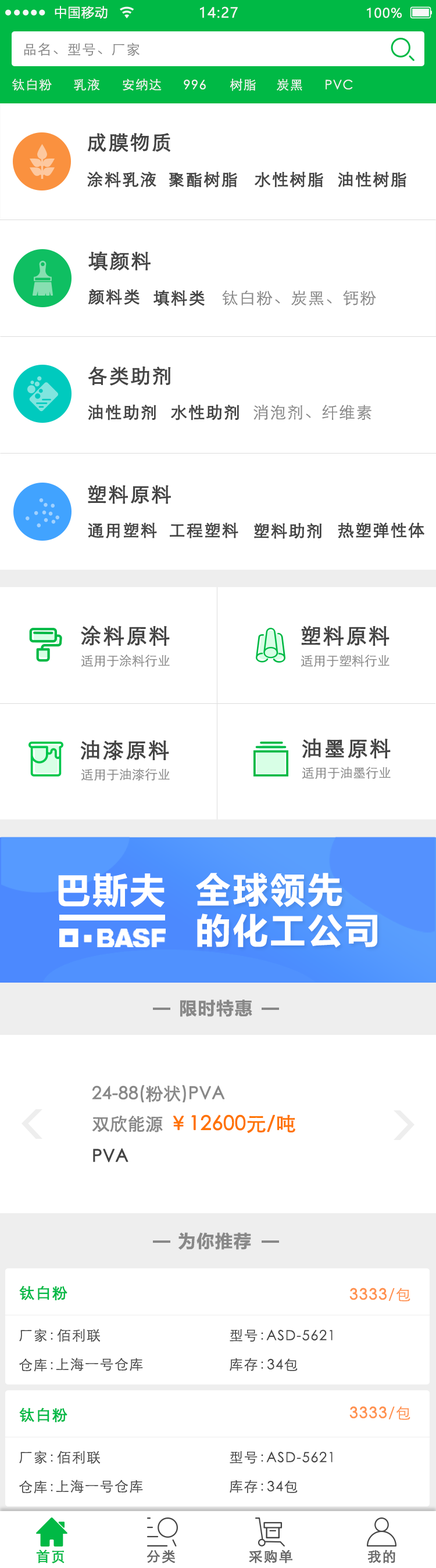
<style>
.page{position:relative;width:436px;height:1568px;background:#ffffff}
.page>*{position:absolute;margin:0}
.t1{font:12.8px "MicrosoftYaHei";letter-spacing:0.06em;color:#f7f7f7}
.t2{font:13.9px "MicrosoftYaHei";letter-spacing:0.06em;color:#f7f7f7}
.t3{font:13.9px "STXihei";letter-spacing:0.06em;color:#888888}
.t4{font:12.8px "STXihei";letter-spacing:0.06em;color:#f5f5f5}
.t5{font:19.7px "STXihei";letter-spacing:0.06em;color:#444444;font-weight:bold}
.t6{font:16.3px "STXihei";letter-spacing:0.06em;color:#444444;font-weight:bold}
.t7{font:16.3px "STXihei";letter-spacing:0.06em;color:#888888}
.t8{font:20.9px "STXihei";letter-spacing:0.06em;color:#444444;font-weight:bold}
.t9{font:12.8px "STXihei";color:#888888}
.t10{font:34.8px "MicrosoftYaHei-Bold";letter-spacing:0.07em;color:#ffffff}
.t11{font:34.8px/40.7px "MicrosoftYaHei-Bold";letter-spacing:0.07em;color:#ffffff}
.t12{font:17.4px "MicrosoftYaHei-Bold";letter-spacing:0.06em;color:#888888}
.t13{font:17.4px "STXihei";color:#888888;font-weight:bold}
.t14{font:19.7px "STXihei";color:#ff7300;font-weight:bold}
.t15{font:17.4px "STXihei";color:#444444;font-weight:bold}
.t16{font:15.1px "STXihei";letter-spacing:0.06em;color:#00b945;font-weight:bold}
.t17{font:15.1px "STXihei";letter-spacing:0.06em;color:#ff9250;font-weight:bold}
.t18{font:15.1px "STXihei";letter-spacing:0.06em;color:#ff9250}
.t19{font:13.9px "STXihei";letter-spacing:0.06em;color:#444444}
.t20{font:13.9px "STXihei";letter-spacing:0.06em;color:#00b945;font-weight:bold}
.t21{font:13.9px "STXihei";letter-spacing:0.06em;color:#666666;font-weight:bold}
</style>
<div class="page">
<p class="t1" style="left:55px;top:6px;width:52px;height:13px">中国移动</p>
<p class="t2" style="left:200px;top:6px;width:38px;height:12px">14:27</p>
<p class="t1" style="left:366px;top:8px;width:35px;height:10px">100%</p>
<p class="t3" style="left:24px;top:42px;width:115px;height:14px">品名、型号、厂家</p>
<p class="t4" style="left:12px;top:78px;width:40px;height:13px">钛白粉</p>
<p class="t4" style="left:74px;top:78px;width:26px;height:13px">乳液</p>
<p class="t4" style="left:123px;top:78px;width:38px;height:13px">安纳达</p>
<p class="t4" style="left:184px;top:80px;width:22px;height:9px">996</p>
<p class="t4" style="left:229px;top:78px;width:27px;height:13px">树脂</p>
<p class="t4" style="left:276px;top:78px;width:26px;height:13px">炭黑</p>
<p class="t4" style="left:325px;top:80px;width:28px;height:9px">PVC</p>
<p class="t5" style="left:87px;top:133px;width:83px;height:19px">成膜物质</p>
<p class="t6" style="left:87px;top:171px;width:69px;height:17px">涂料乳液</p>
<p class="t6" style="left:169px;top:171px;width:68px;height:17px">聚酯树脂</p>
<p class="t6" style="left:254px;top:171px;width:69px;height:17px">水性树脂</p>
<p class="t6" style="left:337px;top:171px;width:69px;height:17px">油性树脂</p>
<p class="t5" style="left:88px;top:251px;width:62px;height:20px">填颜料</p>
<p class="t6" style="left:88px;top:289px;width:51px;height:16px">颜料类</p>
<p class="t6" style="left:153px;top:290px;width:51px;height:16px">填料类</p>
<p class="t7" style="left:222px;top:290px;width:154px;height:16px">钛白粉、炭黑、钙粉</p>
<p class="t5" style="left:88px;top:366px;width:83px;height:20px">各类助剂</p>
<p class="t6" style="left:88px;top:404px;width:68px;height:16px">油性助剂</p>
<p class="t6" style="left:171px;top:404px;width:68px;height:16px">水性助剂</p>
<p class="t7" style="left:253px;top:405px;width:118px;height:15px">消泡剂、纤维素</p>
<p class="t5" style="left:88px;top:485px;width:83px;height:19px">塑料原料</p>
<p class="t6" style="left:88px;top:522px;width:69px;height:16px">通用塑料</p>
<p class="t6" style="left:170px;top:522px;width:68px;height:16px">工程塑料</p>
<p class="t6" style="left:254px;top:523px;width:68px;height:16px">塑料助剂</p>
<p class="t6" style="left:337px;top:522px;width:87px;height:16px">热塑弹性体</p>
<p class="t8" style="left:81px;top:625px;width:89px;height:21px">涂料原料</p>
<p class="t8" style="left:301px;top:625px;width:88px;height:21px">塑料原料</p>
<p class="t9" style="left:81px;top:654px;width:89px;height:13px">适用于涂料行业</p>
<p class="t9" style="left:301px;top:654px;width:88px;height:13px">适用于塑料行业</p>
<p class="t8" style="left:81px;top:740px;width:88px;height:20px">油漆原料</p>
<p class="t8" style="left:302px;top:738px;width:88px;height:20px">油墨原料</p>
<p class="t9" style="left:81px;top:768px;width:89px;height:13px">适用于油漆行业</p>
<p class="t9" style="left:302px;top:767px;width:88px;height:12px">适用于油墨行业</p>
<p class="t10" style="left:58px;top:873px;width:106px;height:34px">巴斯夫</p>
<p class="t11" style="left:196px;top:873px;width:181px;height:75px">全球领先<br>的化工公司</p>
<p class="t12" style="left:180px;top:999px;width:72px;height:18px">限时特惠</p>
<p class="t13" style="left:92px;top:1085px;width:133px;height:18px">24-88(粉状)PVA</p>
<p class="t13" style="left:92px;top:1116px;width:71px;height:16px">双欣能源</p>
<p class="t14" style="left:172px;top:1114px;width:123px;height:19px">￥12600元/吨</p>
<p class="t15" style="left:93px;top:1148px;width:35px;height:15px">PVA</p>
<p class="t12" style="left:178px;top:1232px;width:73px;height:18px">为你推荐</p>
<p class="t16" style="left:19px;top:1286px;width:48px;height:14px">钛白粉</p>
<p class="t17" style="left:349px;top:1288px;width:61px;height:13px">3333<span class="t18">/包</span></p>
<p class="t19" style="left:19px;top:1329px;width:34px;height:13px">厂家：</p>
<p class="t19" style="left:57px;top:1329px;width:43px;height:13px">佰利联</p>
<p class="t19" style="left:229px;top:1329px;width:34px;height:13px">型号：</p>
<p class="t19" style="left:266px;top:1329px;width:66px;height:12px">ASD-5621</p>
<p class="t19" style="left:19px;top:1358px;width:34px;height:14px">仓库：</p>
<p class="t19" style="left:56px;top:1358px;width:87px;height:13px">上海一号仓库</p>
<p class="t19" style="left:229px;top:1358px;width:34px;height:13px">库存：</p>
<p class="t19" style="left:267px;top:1358px;width:30px;height:13px">34包</p>
<p class="t16" style="left:19px;top:1408px;width:48px;height:14px">钛白粉</p>
<p class="t17" style="left:349px;top:1406px;width:61px;height:14px">3333<span class="t18">/包</span></p>
<p class="t19" style="left:19px;top:1451px;width:34px;height:13px">厂家：</p>
<p class="t19" style="left:57px;top:1451px;width:43px;height:13px">佰利联</p>
<p class="t19" style="left:229px;top:1451px;width:34px;height:13px">型号：</p>
<p class="t19" style="left:266px;top:1451px;width:66px;height:12px">ASD-5621</p>
<p class="t19" style="left:19px;top:1480px;width:34px;height:14px">仓库：</p>
<p class="t19" style="left:56px;top:1480px;width:87px;height:13px">上海一号仓库</p>
<p class="t19" style="left:229px;top:1480px;width:34px;height:13px">库存：</p>
<p class="t19" style="left:267px;top:1480px;width:30px;height:13px">34包</p>
<p class="t20" style="left:36px;top:1549px;width:28px;height:14px">首页</p>
<p class="t21" style="left:146px;top:1550px;width:29px;height:13px">分类</p>
<p class="t21" style="left:249px;top:1549px;width:43px;height:14px">采购单</p>
<p class="t21" style="left:367px;top:1549px;width:28px;height:14px">我的</p>
</div>
